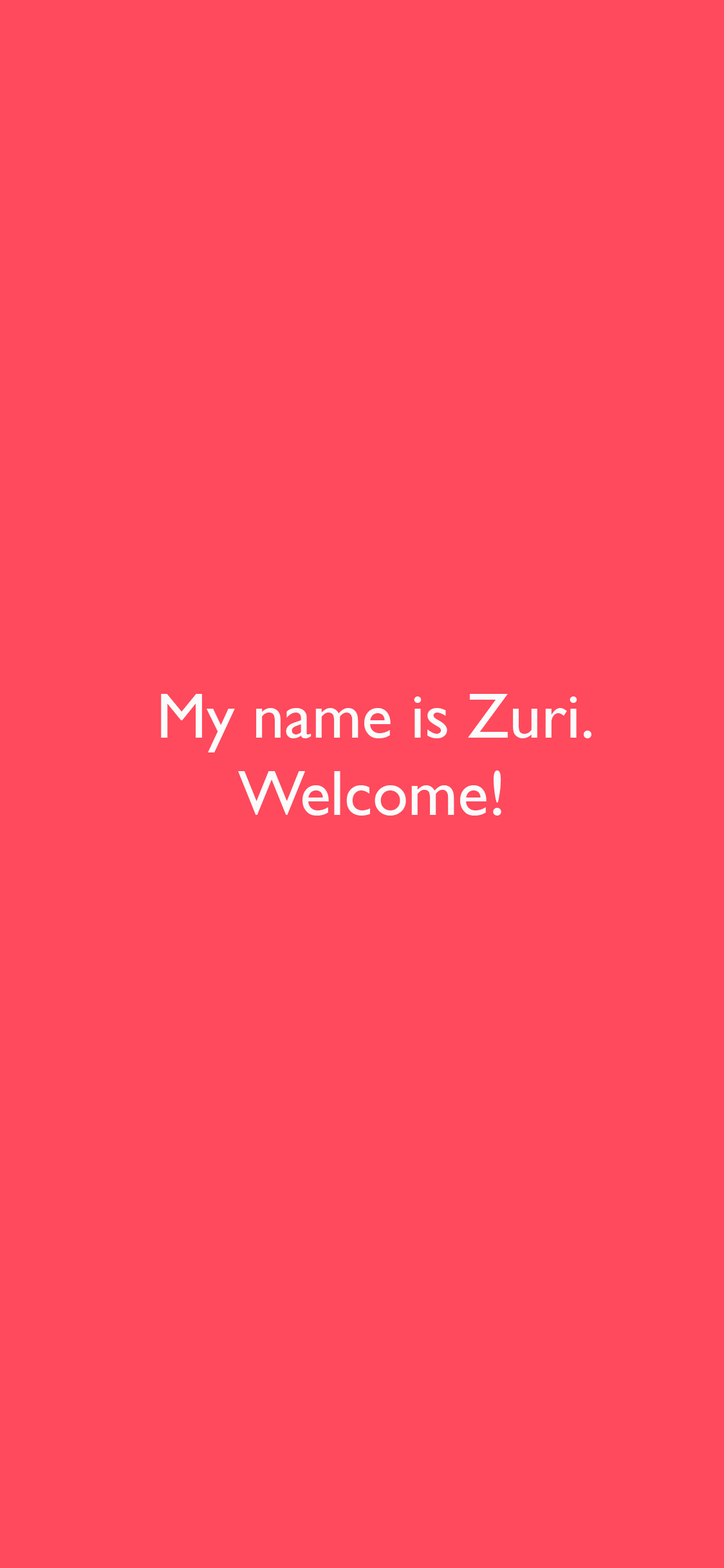
<style>
.page{position:relative;width:724px;height:1568px;background:#ff495c}
.page>*{position:absolute;margin:0}
.t1{font:64.4px "GillSans";color:#fbfbfb}
</style>
<div class="page">
<p class="t1" style="left:161px;top:694px;width:431px;height:122px;text-align:center">My name is Zuri.<br>Welcome!</p>
</div>
